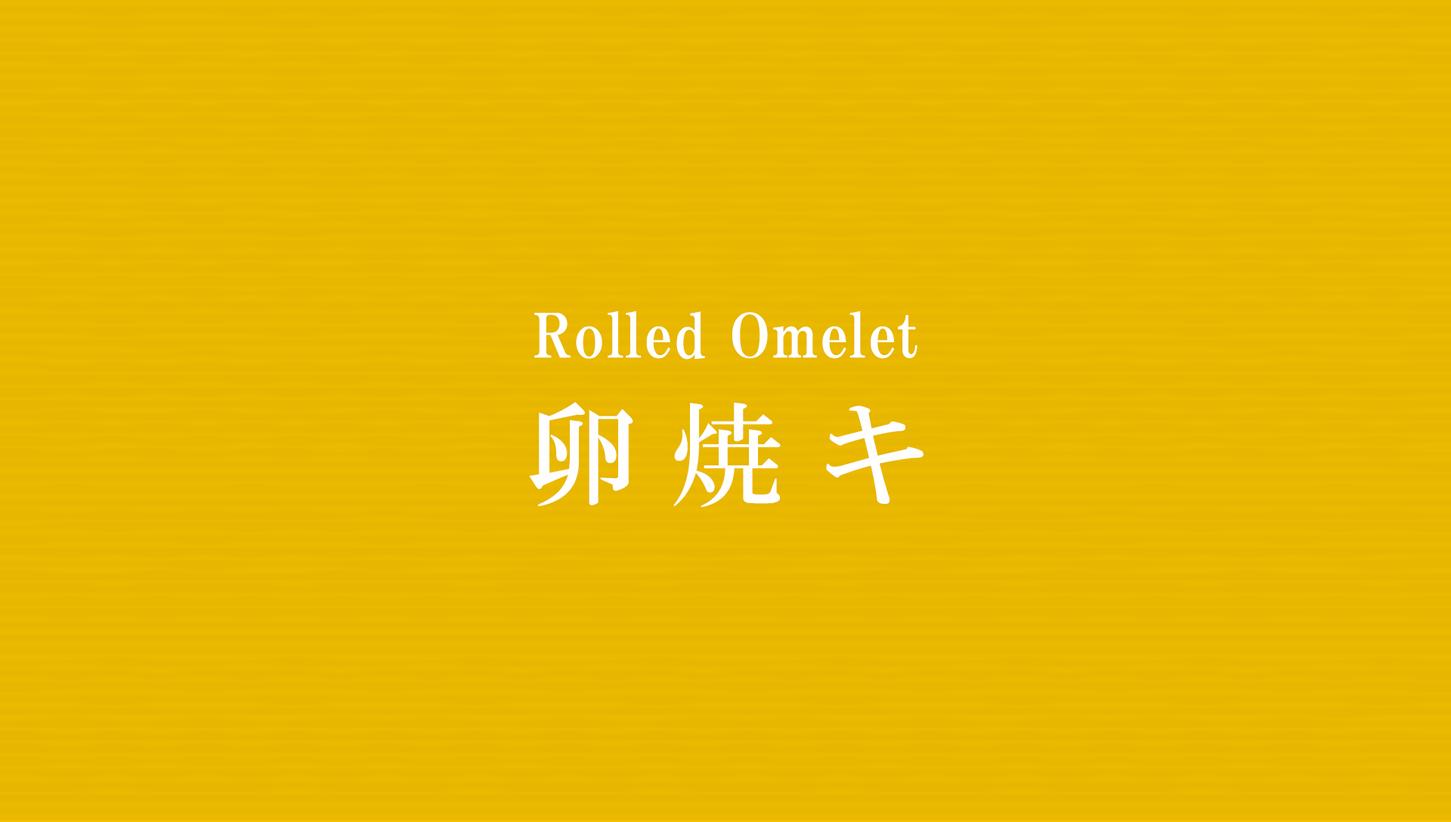
<style>
.page{position:relative;width:1451px;height:822px;background:#e6b600}
.page>*{position:absolute;margin:0}
.t1{font:60.4px "HGPMinchoE";letter-spacing:0.025em;color:#ffffff}
.t2{font:112.6px "HGMinchoB";letter-spacing:0.29em;color:#fffeff}
</style>
<div class="page">
<p class="t1" style="left:534px;top:311px;width:383px;height:49px">Rolled Omelet</p>
<p class="t2" style="left:529px;top:402px;width:394px;height:105px">卵焼キ</p>
</div>
